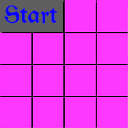
<style>
.page{position:relative;width:128px;height:128px;background:#ff38ff}
.page>*{position:absolute;margin:0}
.t1{font:26.7px "MorrisRoman-Black";color:#0800ff}
</style>
<div class="page">
<p class="t1" style="left:4px;top:5px;width:53px;height:19px">Start</p>
</div>
